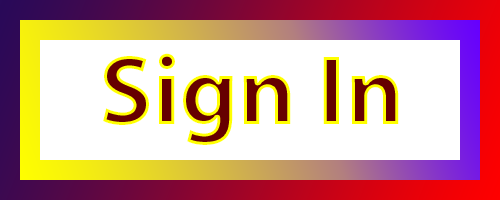
<style>
.page{position:relative;width:500px;height:200px;background:#ffffff}
.page>*{position:absolute;margin:0}
.t1{font:100px "MyriadPro-Bold";color:#660000}
</style>
<div class="page">
<p class="t1" style="left:103px;top:53px;width:296px;height:92px">Sign In</p>
</div>
